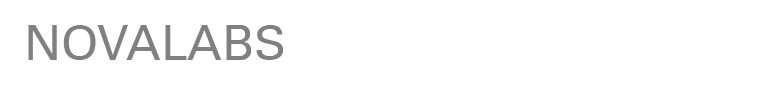
<style>
.page{position:relative;width:776px;height:93px;background:#ffffff}
.page>*{position:absolute;margin:0}
.t1{font:48px "UniversLT";color:#808080}
</style>
<div class="page">
<p class="t1" style="left:28px;top:25px;width:256px;height:35px">NOVALABS</p>
</div>
